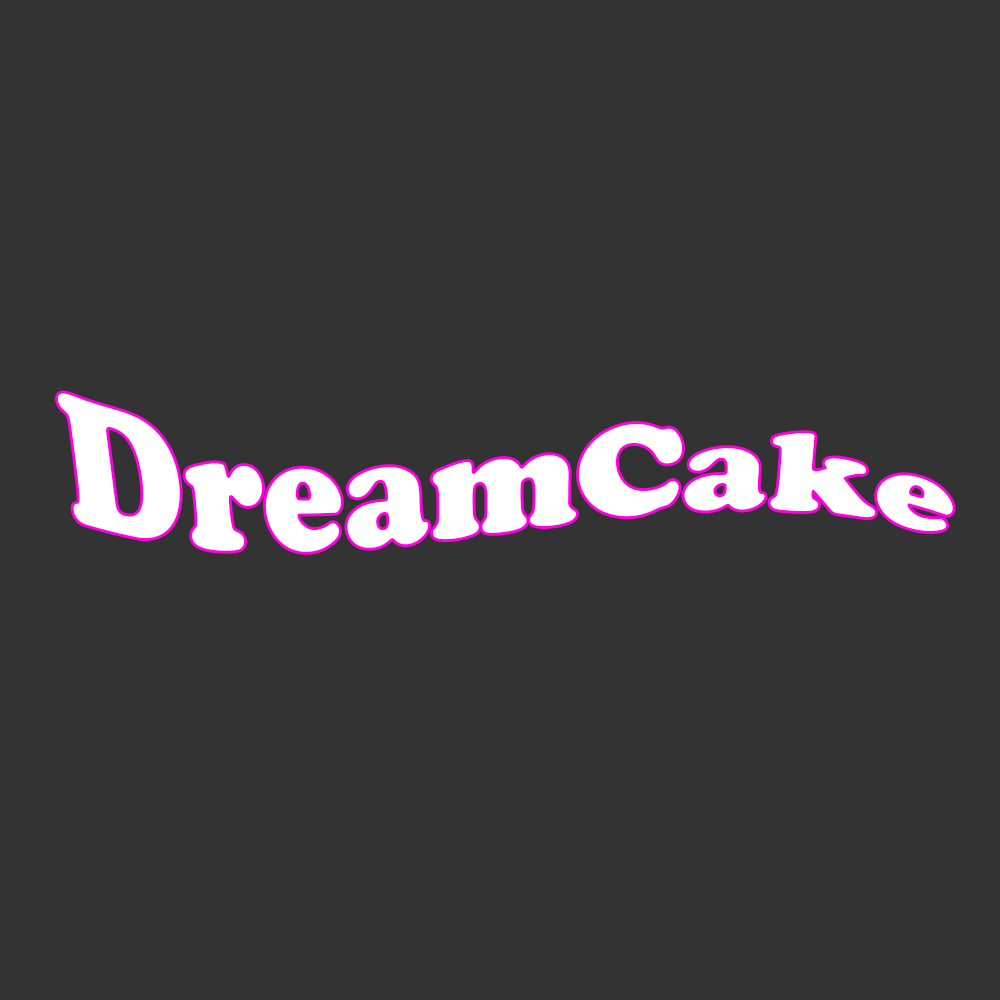
<style>
.page{position:relative;width:1000px;height:1000px;background:#333333}
.page>*{position:absolute;margin:0}
.t1{font:145.8px "CooperBlack";color:#ffffff}
</style>
<div class="page">
<p class="t1" style="left:58px;top:393px;width:895px;height:159px">DreamCake</p>
</div>
